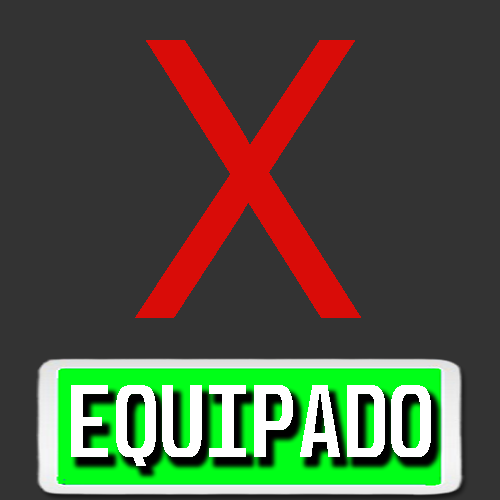
<style>
.page{position:relative;width:500px;height:500px;background:#333333}
.page>*{position:absolute;margin:0}
.t1{font:388px "ArialMT";color:#d90c08;scale:0.89 1}
.t2{font:88.1px "Unispace-Bold";color:#ffffff;scale:0.85 1}
.t3{font:87.7px "Unispace-Bold";color:#ffffff;scale:0.85 1}
</style>
<div class="page">
<p class="t1" style="left:135px;top:40px;width:226px;height:278px">X</p>
<p class="t2" style="left:71px;top:385px;width:360px;height:81px">EQUIPA<span class="t3">DO</span></p>
</div>
